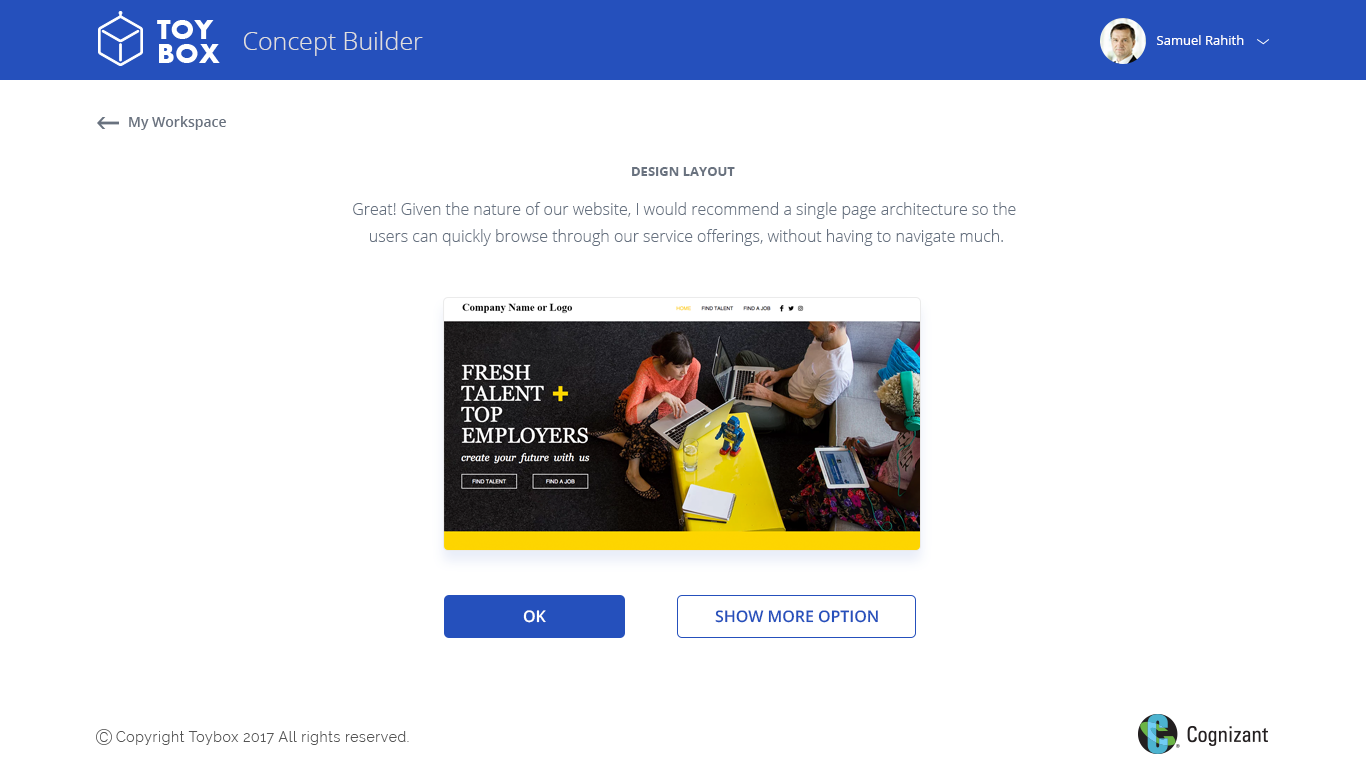
<style>
.page{position:relative;width:1366px;height:768px;background:#ffffff}
.page>*{position:absolute;margin:0}
.t1{font:25px "OpenSans-Light";color:#dedede}
.t2{font:13px "OpenSans";color:#ffffff}
.t3{font:14px "OpenSans-Semibold";color:#69727f}
.t4{font:13px "OpenSans-Bold";color:#69727f;text-transform:uppercase}
.t5{font:16px/27px "OpenSans-Light";color:#667180}
.t6{font:16px "OpenSans-Semibold";color:#ffffff}
.t7{font:16px "OpenSans-Semibold";color:#2550bc}
.t8{font:18.2px "Roboto-Thin";color:#545454}
.t9{font:14px "Raleway-Light";letter-spacing:0.05em;color:#545454}
</style>
<div class="page">
<p class="t1" style="left:244px;top:31px;width:179px;height:25px">Concept Builder</p>
<p class="t2" style="left:1157px;top:35px;width:87px;height:10px">Samuel Rahith</p>
<p class="t3" style="left:129px;top:116px;width:97px;height:14px">My Workspace</p>
<p class="t4" style="left:632px;top:167px;width:103px;height:9px">Design Layout</p>
<p class="t5" style="left:353px;top:202px;width:663px;height:44px;text-align:center">Great! Given the nature of our website, I would recommend a single page architecture so the <br>users can quickly browse through our service offerings, without having to navigate much.</p>
<p class="t6" style="left:523px;top:610px;width:23px;height:13px">OK</p>
<p class="t7" style="left:715px;top:610px;width:163px;height:13px">SHOW MORE OPTION</p>
<p class="t8" style="left:100px;top:732px;width:8px;height:10px">c</p>
<p class="t9" style="left:116px;top:731px;width:293px;height:14px">Copyright Toybox 2017 All rights reserved.</p>
</div>
